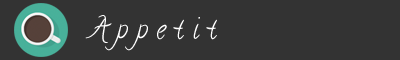
<style>
.page{position:relative;width:400px;height:60px;background:#333333}
.page>*{position:absolute;margin:0}
.t1{font:28px "Calligraffitti-Regular";letter-spacing:0.3em;color:#ffffff}
</style>
<div class="page">
<p class="t1" style="left:85px;top:15px;width:132px;height:36px">Appetit</p>
</div>
